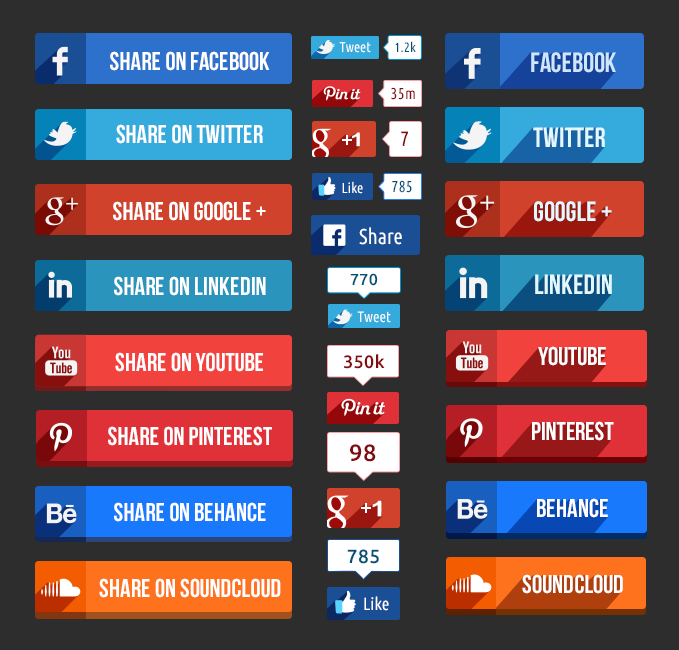
<style>
.page{position:relative;width:679px;height:650px;background:#2d2d2d}
.page>*{position:absolute;margin:0}
.t1{font:13.4px "UbuntuCondensed-Regular";letter-spacing:0.025em;color:#005377}
.t2{font:25.7px "BebasNeue";color:#ffffff;text-transform:uppercase}
.t3{font:14.2px "UbuntuCondensed-Regular";color:#ffffff}
.t4{font:27.8px "BebasNeue";color:#cde7ff;text-transform:uppercase}
.t5{font:15.8px "UbuntuCondensed-Regular";letter-spacing:0.025em;color:#850a0f}
.t6{font:19px "ArialMT";letter-spacing:-0.01em;color:#ffffff}
.t7{font:20.8px "UbuntuCondensed-Regular";letter-spacing:0.025em;color:#850a0f}
.t8{font:27.8px "BebasNeue";color:#e2f8ff;text-transform:uppercase}
.t9{font:14.5px "UbuntuCondensed-Regular";color:#ffffff}
.t10{font:15.8px "UbuntuCondensed-Regular";letter-spacing:0.025em;color:#005377}
.t11{font:21.4px "UbuntuCondensed-Regular";color:#ffffff}
.t12{font:15.9px "Ubuntu-Medium";letter-spacing:0.025em;color:#005377}
.t13{font:15px "UbuntuCondensed-Regular";color:#ffffff}
.t14{font:25.8px "BebasNeue";color:#ffffff;text-transform:uppercase}
.t15{font:17.9px "Ubuntu-Medium";letter-spacing:0.025em;color:#850a0f}
.t16{font:25.8px "BebasNeue";color:#ffffff}
.t17{font:25.6px "BebasNeue";color:#ffffff;text-transform:uppercase}
.t18{font:23.6px "Ubuntu-Medium";letter-spacing:0.025em;color:#850a0f}
.t19{font:21.6px "ArialMT";letter-spacing:-0.01em;color:#ffffff}
.t20{font:19.1px "Ubuntu-Medium";letter-spacing:0.025em;color:#005377}
.t21{font:17.6px "UbuntuCondensed-Regular";color:#ffffff}
</style>
<div class="page">
<p class="t1" style="left:395px;top:41px;width:21px;height:12px">1.2k</p>
<p class="t2" style="left:110px;top:51px;width:160px;height:20px">share on facebook</p>
<p class="t3" style="left:339px;top:42px;width:32px;height:11px">Tweet</p>
<p class="t4" style="left:531px;top:52px;width:85px;height:21px">facebook</p>
<p class="t5" style="left:391px;top:87px;width:24px;height:13px">35m</p>
<p class="t2" style="left:116px;top:124px;width:147px;height:20px">share on TWITTER</p>
<p class="t6" style="left:342px;top:135px;width:10px;height:10px">+</p>
<p class="t7" style="left:401px;top:131px;width:7px;height:15px">7</p>
<p class="t8" style="left:533px;top:127px;width:72px;height:20px">TWITTER</p>
<p class="t9" style="left:342px;top:181px;width:21px;height:13px">Like</p>
<p class="t10" style="left:392px;top:180px;width:20px;height:13px">785</p>
<p class="t2" style="left:113px;top:201px;width:153px;height:20px">share on GOOGLE +</p>
<p class="t8" style="left:534px;top:201px;width:78px;height:21px">GOOGLE +</p>
<p class="t11" style="left:359px;top:227px;width:43px;height:18px">Share</p>
<p class="t2" style="left:114px;top:276px;width:152px;height:20px">share on LINKEDIN</p>
<p class="t12" style="left:350px;top:273px;width:28px;height:13px">770</p>
<p class="t8" style="left:535px;top:274px;width:77px;height:20px">LINKEDIN</p>
<p class="t13" style="left:357px;top:311px;width:34px;height:12px">Tweet</p>
<p class="t2" style="left:115px;top:352px;width:148px;height:20px">share on YOUTUBE</p>
<p class="t14" style="left:538px;top:346px;width:68px;height:20px">YOUTUBE</p>
<p class="t15" style="left:344px;top:354px;width:41px;height:15px">350k</p>
<p class="t16" style="left:532px;top:421px;width:82px;height:20px">PINTEREST</p>
<p class="t17" style="left:108px;top:426px;width:164px;height:20px">share on PINTEREST</p>
<p class="t18" style="left:350px;top:444px;width:26px;height:18px">98</p>
<p class="t2" style="left:114px;top:502px;width:152px;height:20px">share on BEHANCE</p>
<p class="t19" style="left:361px;top:503px;width:10px;height:10px">+</p>
<p class="t14" style="left:537px;top:498px;width:71px;height:20px">BEHANCE</p>
<p class="t20" style="left:347px;top:549px;width:32px;height:15px">785</p>
<p class="t2" style="left:99px;top:578px;width:182px;height:20px">share on SoundCloud</p>
<p class="t14" style="left:522px;top:574px;width:101px;height:20px">SoundCloud</p>
<p class="t21" style="left:364px;top:596px;width:25px;height:15px">Like</p>
</div>
